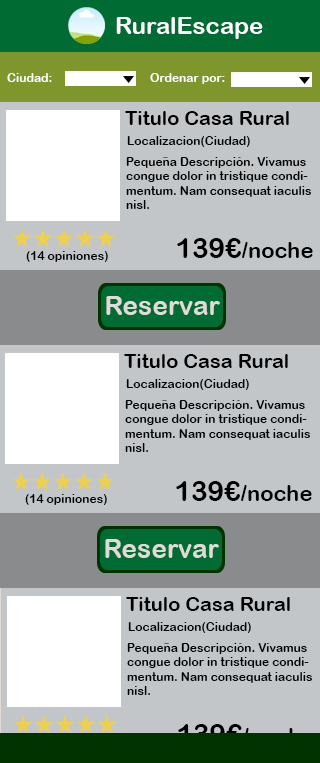
<style>
.page{position:relative;width:320px;height:763px;background:#c3c6c8}
.page>*{position:absolute;margin:0}
.t1{font:24px "ArialRoundedMTBold";color:#ffffff}
.t2{font:12px "ArialRoundedMTBold";color:#ffffff}
.t3{font:20px "ArialRoundedMTBold";color:#000000}
.t4{font:12px "ArialRoundedMTBold";color:#000000}
.t5{font:22px "ArialRoundedMTBold";color:#000000}
.t6{font:28px "ArialRoundedMTBold";color:#000000}
.t7{font:26px "ArialRoundedMTBold";color:#e1dbd8}
.t8{font:22px "ArialRoundedMTBold"}
.t9{font:28px "ArialRoundedMTBold"}
</style>
<div class="page">
<p class="t1" style="left:116px;top:17px;width:147px;height:22px">RuralEscape</p>
<p class="t2" style="left:7px;top:73px;width:45px;height:9px">Ciudad:</p>
<p class="t2" style="left:150px;top:73px;width:75px;height:11px">Ordenar por:</p>
<p class="t3" style="left:125px;top:111px;width:164px;height:14px">Titulo Casa Rural</p>
<p class="t4" style="left:127px;top:136px;width:123px;height:11px">Localizacion(Ciudad)</p>
<p class="t4" style="left:126px;top:157px;width:185px;height:52px">Pequeña Descripción. Vivamus congue dolor in tristique condimentum. Nam consequat iaculis nisl.</p>
<p class="t5" style="left:177px;top:238px;width:136px;height:20px"><span class="t6">139€</span>/noche</p>
<p class="t4" style="left:26px;top:251px;width:82px;height:11px">(14 opiniones)</p>
<p class="t7" style="left:106px;top:296px;width:114px;height:19px">Reservar</p>
<p class="t3" style="left:124px;top:354px;width:164px;height:14px">Titulo Casa Rural</p>
<p class="t4" style="left:126px;top:379px;width:123px;height:11px">Localizacion(Ciudad)</p>
<p class="t4" style="left:125px;top:400px;width:185px;height:52px">Pequeña Descripción. Vivamus congue dolor in tristique condimentum. Nam consequat iaculis nisl.</p>
<p class="t5" style="left:176px;top:481px;width:136px;height:20px"><span class="t6">139€</span>/noche</p>
<p class="t4" style="left:25px;top:494px;width:82px;height:11px">(14 opiniones)</p>
<p class="t7" style="left:105px;top:539px;width:114px;height:19px">Reservar</p>
<p class="t3" style="left:126px;top:597px;width:164px;height:14px">Titulo Casa Rural</p>
<p class="t4" style="left:128px;top:622px;width:123px;height:11px">Localizacion(Ciudad)</p>
<p class="t4" style="left:127px;top:643px;width:185px;height:52px">Pequeña Descripción. Vivamus congue dolor in tristique condimentum. Nam consequat iaculis nisl.</p>
<p class="t8" style="left:178px;top:724px;width:136px;height:20px"><span class="t9">139€</span>/noche</p>
</div>
